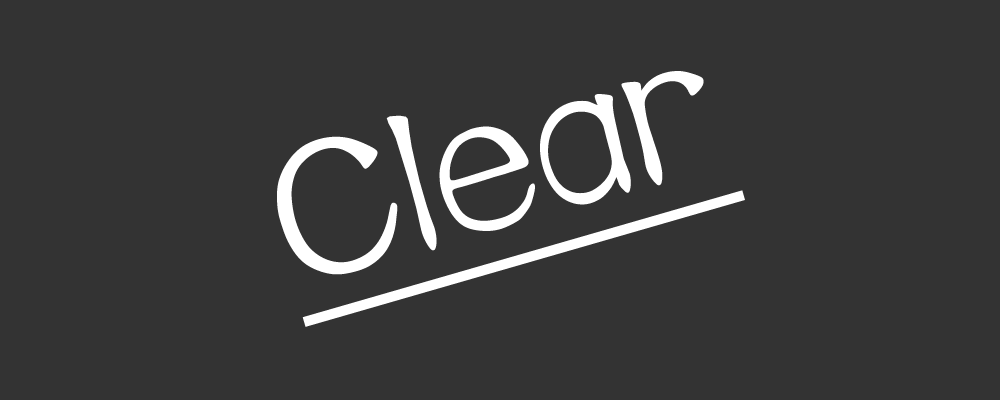
<style>
.page{position:relative;width:1000px;height:400px;background:#333333}
.page>*{position:absolute;margin:0}
.t1{font:200px "HYc5gf";color:#ffffff;text-decoration:underline}
</style>
<div class="page">
<p class="t1" style="left:277px;top:71px;width:468px;height:256px;rotate:-16deg">Clear</p>
</div>
